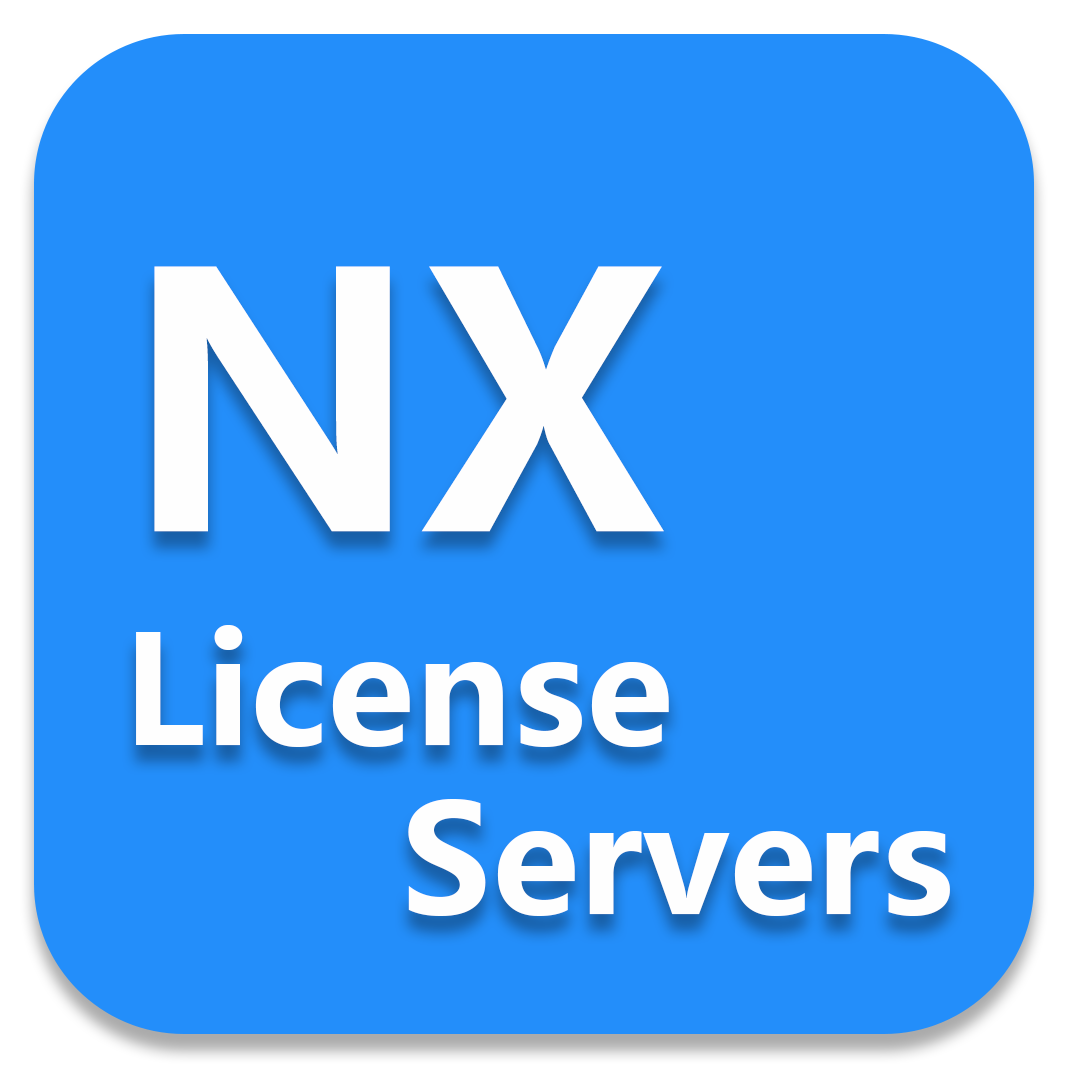
<style>
.page{position:relative;width:1067px;height:1067px;background:#238efa}
.page>*{position:absolute;margin:0}
.t1{font:349.8px "MicrosoftYaHei-Bold";color:#fefefe}
.t2{font:150px "MicrosoftYaHei-Bold";color:#fefefe}
</style>
<div class="page">
<p class="t1" style="left:154px;top:266px;width:510px;height:266px">NX</p>
<p class="t2" style="left:136px;top:625px;width:533px;height:122px">License</p>
<p class="t2" style="left:408px;top:799px;width:542px;height:117px">Servers</p>
</div>
